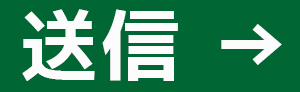
<style>
.page{position:relative;width:300px;height:92px;background:#006633}
.page>*{position:absolute;margin:0}
.t1{font:80px "NicoKaku";letter-spacing:0.025em;color:#fcfcfd}
</style>
<div class="page">
<p class="t1" style="left:22px;top:9px;width:260px;height:72px">送信 →</p>
</div>
